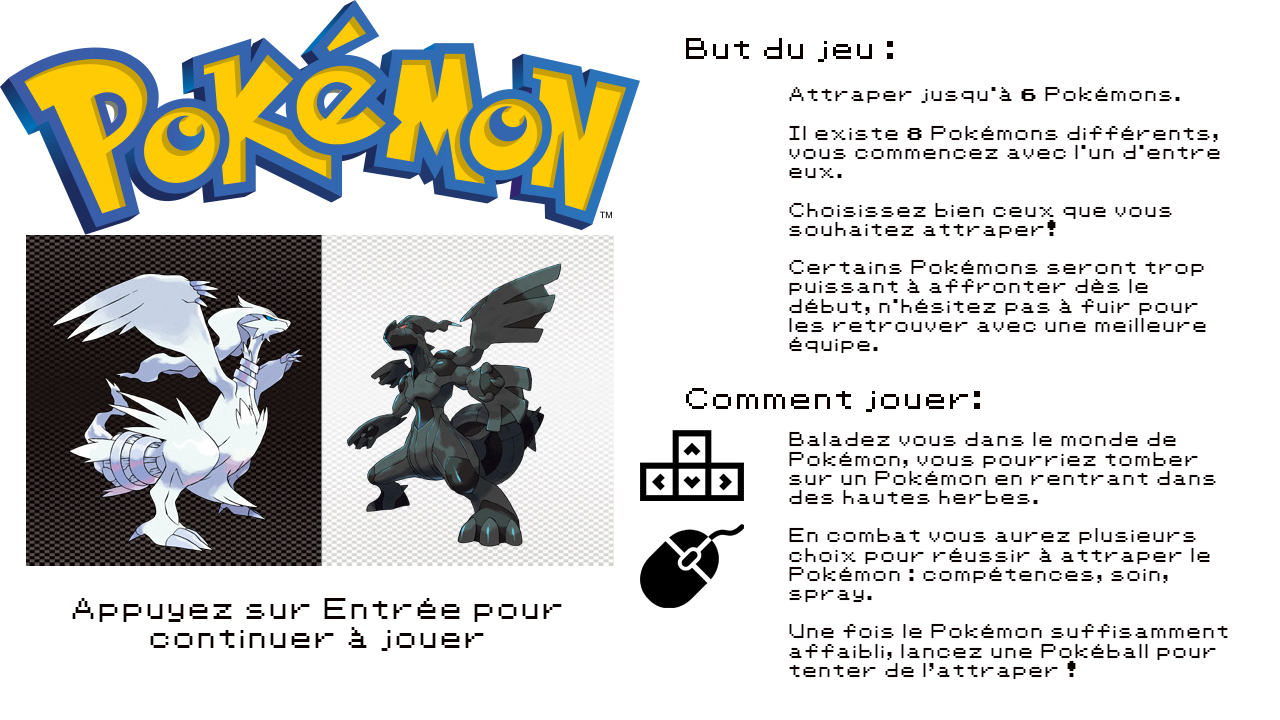
<style>
.page{position:relative;width:1280px;height:720px;background:#ffffff}
.page>*{position:absolute;margin:0}
.t1{font:24px "Pokemon-Classic";color:#0a0200}
.t2{font:16px "Pokemon-Classic";color:#0a0200}
</style>
<div class="page">
<p class="t1" style="left:686px;top:38px;width:207px;height:24px">But du jeu :</p>
<p class="t2" style="left:789px;top:86px;width:431px;height:268px">Attraper jusqu'à 6 Pokémons.<br><br>Il existe 8 Pokémons différents, vous commencez avec l'un d'entre eux.<br><br>Choisissez bien ceux que vous souhaitez attraper!<br><br>Certains Pokémons seront trop puissant à affronter dès le début, n'hésitez pas à fuir pour les retrouver avec une meilleure équipe.</p>
<p class="t1" style="left:686px;top:388px;width:294px;height:24px">Comment jouer:</p>
<p class="t2" style="left:789px;top:431px;width:439px;height:249px">Baladez vous dans le monde de Pokémon, vous pourriez tomber sur un Pokémon en rentrant dans des hautes herbes.<br><br>En combat vous aurez plusieurs choix pour réussir à attraper le Pokémon : compétences, soin, spray.<br><br>Une fois le Pokémon suffisamment affaibli, lancez une Pokéball pour tenter de l’attraper !</p>
<p class="t1" style="left:72px;top:598px;width:490px;height:53px;text-align:center">Appuyez sur Entrée pour continuer à jouer</p>
</div>
